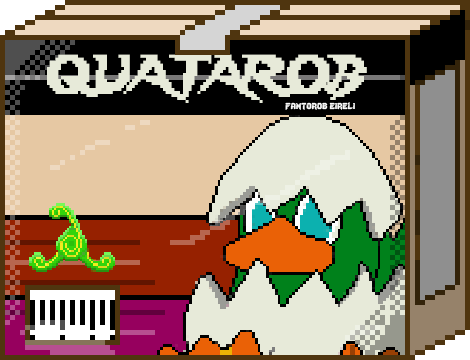
<style>
.page{position:relative;width:470px;height:360px}
.page>*{position:absolute;margin:0}
.t1{font:48.3px "Lady-Radical";color:#e7ead9;scale:0.93 1}
.t2{font:12px "Lady-Radical";color:#fbfbfb}
</style>
<div class="page">
<p class="t1" style="left:47px;top:54px;width:320px;height:49px">QUATAROB</p>
<p class="t2" style="left:285px;top:102px;width:70px;height:8px">fantorob eireli</p>
</div>
